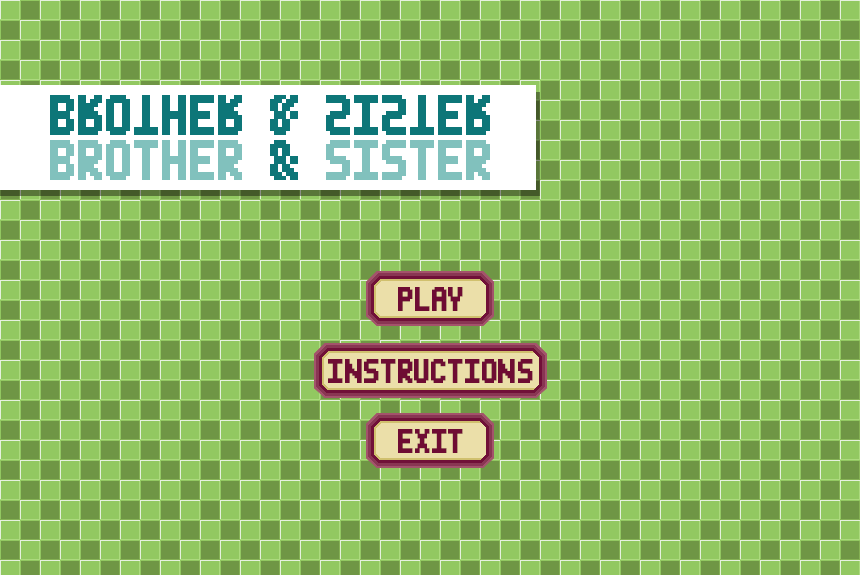
<style>
.page{position:relative;width:860px;height:575px;background:#92c861}
.page>*{position:absolute;margin:0}
.t1{font:80px "MiniPixel-7";color:#0d7678}
.t2{font:80px "MiniPixel-7";color:#81c1bd}
.t3{font:48px "MiniPixel-7";color:#6e0c33}
</style>
<div class="page">
<p class="t1" style="left:50px;top:95px;width:440px;height:40px">BROTHER &amp; SISTER</p>
<p class="t2" style="left:50px;top:140px;width:440px;height:40px">BROTHER <span class="t1">&amp;</span> SISTER</p>
<p class="t3" style="left:398px;top:287px;width:65px;height:24px">PLAY</p>
<p class="t3" style="left:328px;top:359px;width:205px;height:24px">INSTRUCTIONS</p>
<p class="t3" style="left:398px;top:429px;width:65px;height:24px">EXIT</p>
</div>
